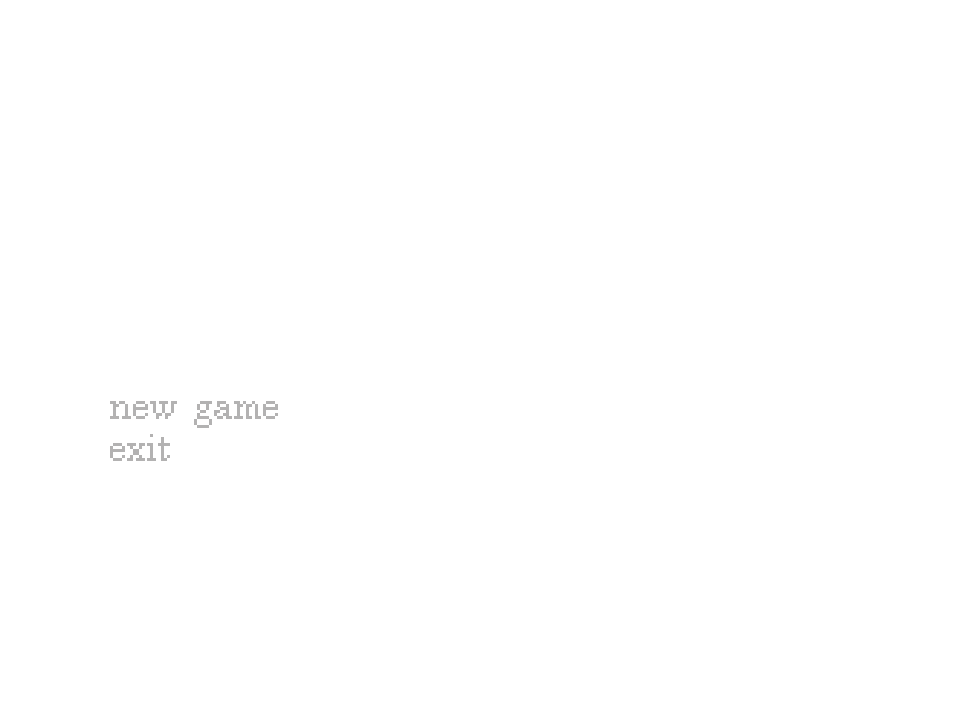
<style>
.page{position:relative;width:960px;height:720px;background:#ffffff}
.page>*{position:absolute;margin:0}
.t1{font:48px/42px "TimesNewPixel";letter-spacing:-0.016em;color:#b3b2b2}
</style>
<div class="page">
<p class="t1" style="left:110px;top:401px;width:168px;height:60px">new game<br>exit</p>
</div>
